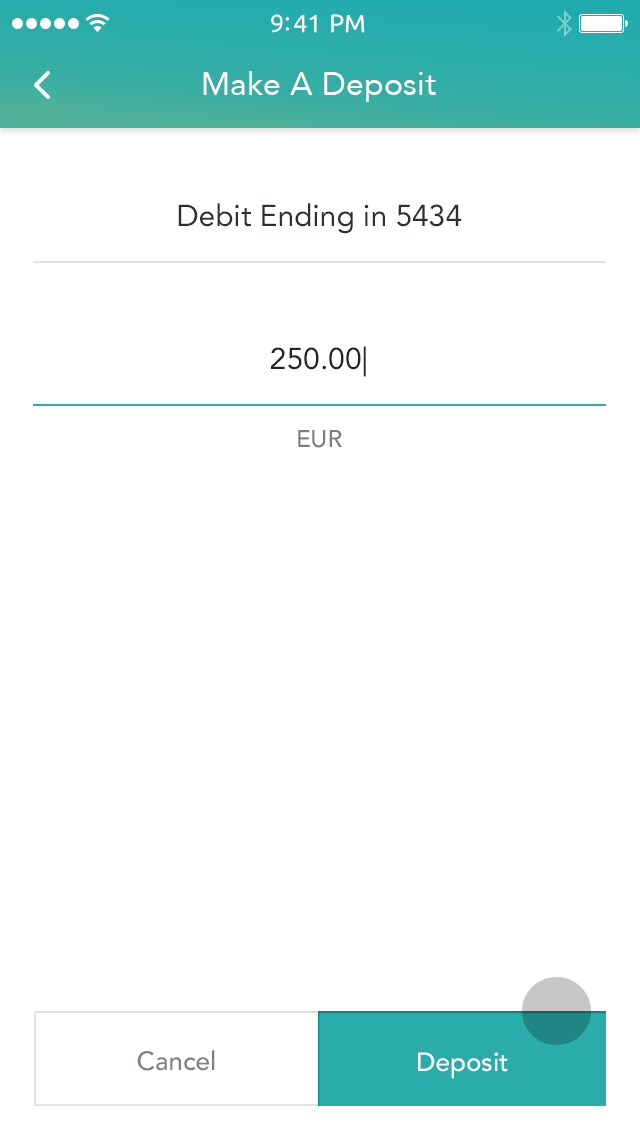
<style>
.page{position:relative;width:640px;height:1136px;background:#ffffff}
.page>*{position:absolute;margin:0}
.t1{font:25px "Ubuntu";color:#ffffff}
.t2{font:32px "Avenir-Roman";color:#ffffff}
.t3{font:30px "Avenir-Roman";color:#2a3231}
.t4{font:30px/78px "Avenir-Roman";color:#222325}
.t5{font:24px/78px "Avenir-Medium";color:#7f7f7f}
.t6{font:26px "Avenir-Medium";color:#7e7f7f}
.t7{font:26px "Avenir-Medium";color:#ffffff}
</style>
<div class="page">
<p class="t1" style="left:271px;top:14px;width:94px;height:19px">9:41 PM</p>
<p class="t2" style="left:203px;top:71px;width:233px;height:31px">Make A Deposit</p>
<p class="t3" style="left:178px;top:203px;width:284px;height:31px">Debit Ending in 5434</p>
<p class="t4" style="left:271px;top:346px;width:95px;height:102px;text-align:center">250.00|<br><span class="t5">EUR</span></p>
<p class="t6" style="left:137px;top:1050px;width:78px;height:21px">Cancel</p>
<p class="t7" style="left:418px;top:1052px;width:90px;height:27px">Deposit</p>
</div>
